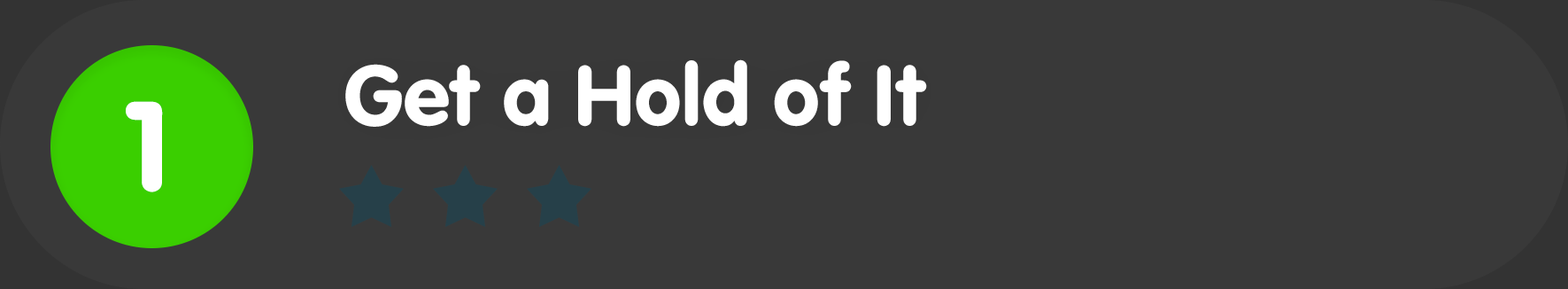
<style>
.page{position:relative;width:1568px;height:289px;background:#393939}
.page>*{position:absolute;margin:0}
.t1{font:88.5px "VAGRundschriftD";color:#ffffff}
.t2{font:132.8px "VAGRundschriftD";color:#ffffff}
</style>
<div class="page">
<p class="t1" style="left:345px;top:59px;width:582px;height:68px">Get a Hold of It</p>
<p class="t2" style="left:126px;top:101px;width:37px;height:91px">1</p>
</div>
